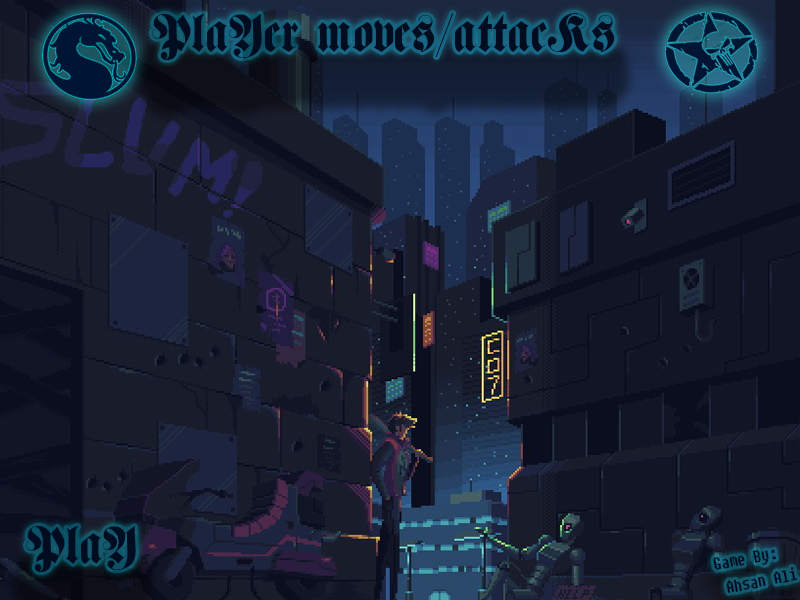
<style>
.page{position:relative;width:800px;height:600px}
.page>*{position:absolute;margin:0}
.t1{font:50px "FetteHaenelFraktur";color:#000d21}
.t2{font:16.9px/25.3px "Fixedsys";color:#000d21;scale:0.76 1}
</style>
<div class="page">
<p class="t1" style="left:151px;top:13px;width:464px;height:47px">PlaYer moves/attacKs</p>
<p class="t1" style="left:25px;top:526px;width:111px;height:46px">PlaY</p>
<p class="t2" style="left:713px;top:549px;width:85px;height:44px;rotate:-11deg">Game By:<br> Ahsan Ali</p>
</div>
